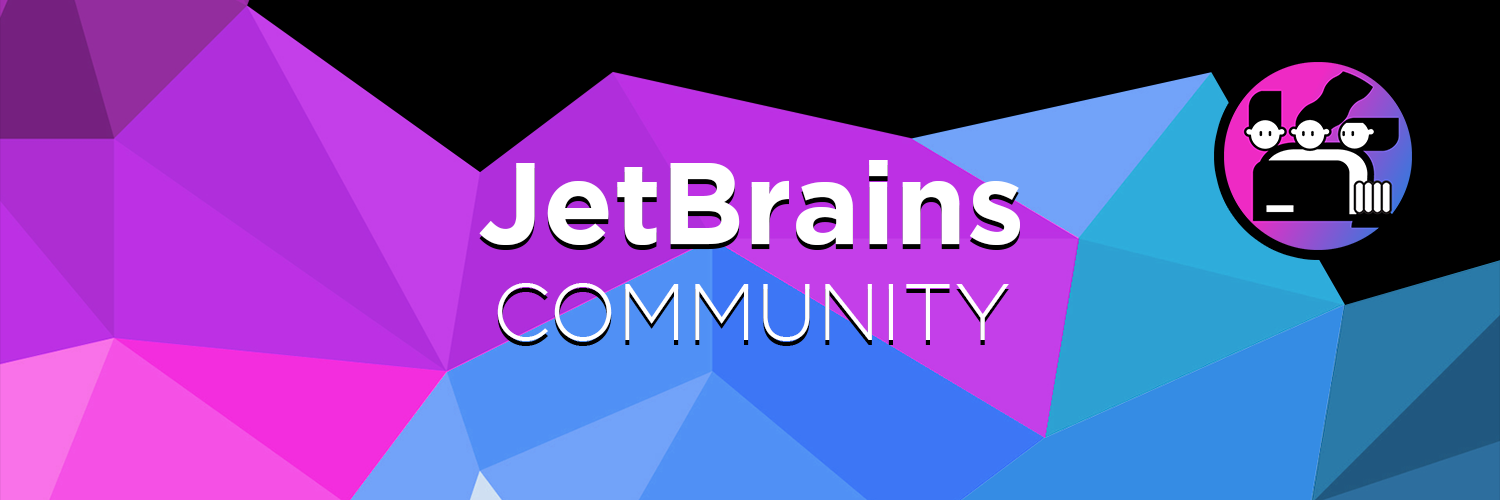
<style>
.page{position:relative;width:1500px;height:500px;background:#000000}
.page>*{position:absolute;margin:0}
.t1{font:115px "Gotham-Bold";color:#ffffff}
.t2{font:80px "Gotham-Light";color:#ffffff;text-transform:uppercase}
</style>
<div class="page">
<p class="t1" style="left:479px;top:160px;width:541px;height:181px;text-align:center">JetBrains<br><span class="t2">Community</span></p>
</div>
